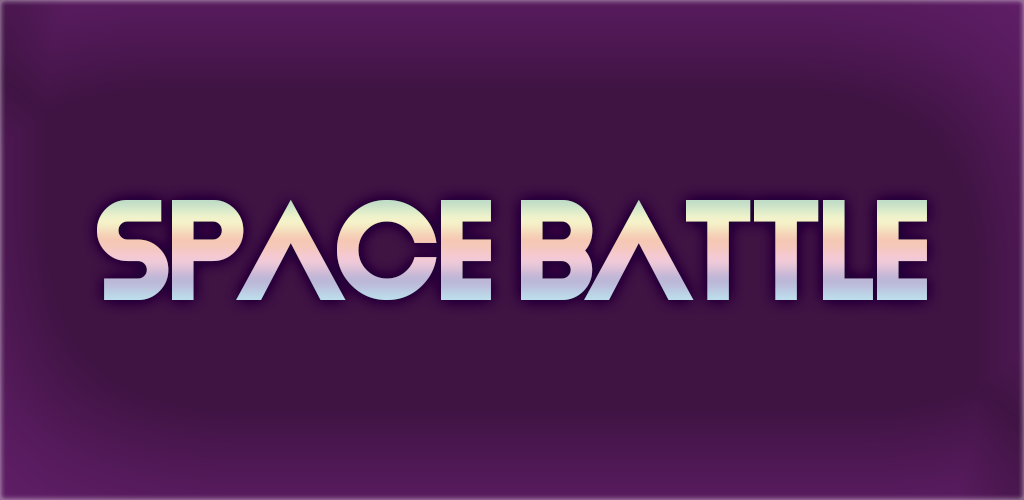
<style>
.page{position:relative;width:1024px;height:500px;background:#3f1443}
.page>*{position:absolute;margin:0}
.t1{font:145.8px "MiracleDay";letter-spacing:-0.02em}
</style>
<div class="page">
<p class="t1" style="left:97px;top:200px;width:830px;height:100px">SPACE BATTLE</p>
</div>
